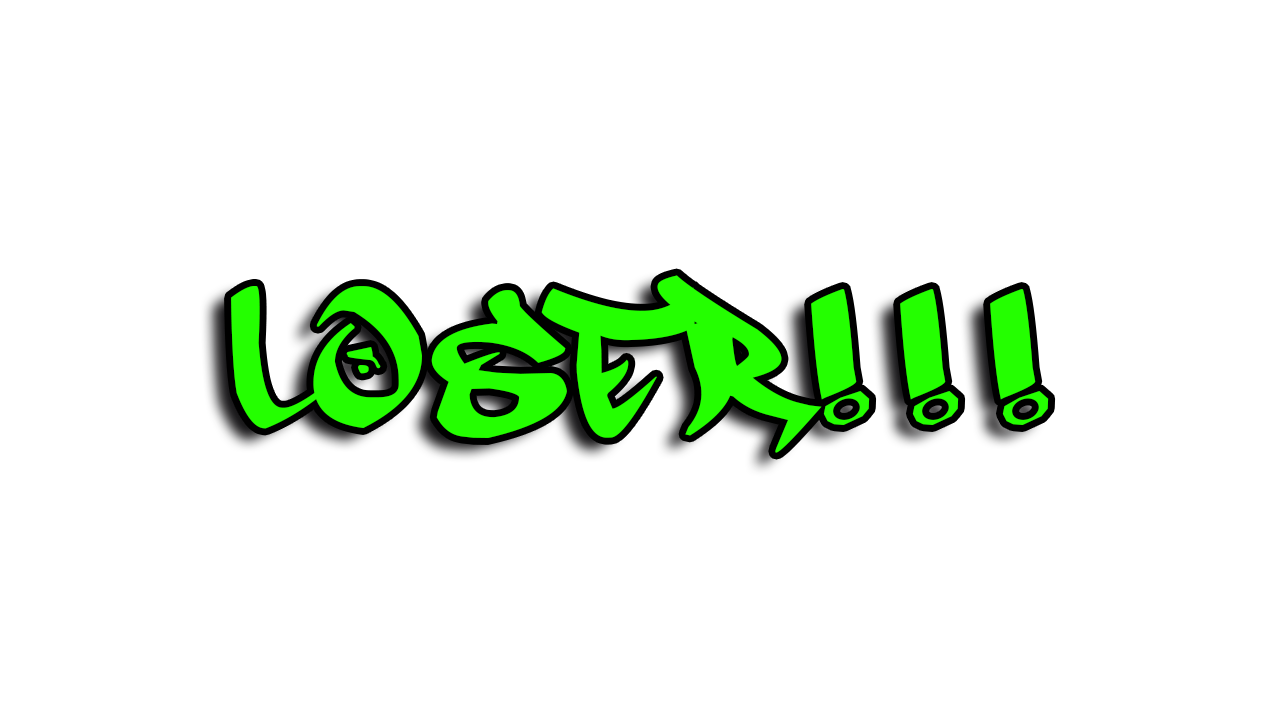
<style>
.page{position:relative;width:1280px;height:720px;background:#ffffff}
.page>*{position:absolute;margin:0}
.t1{font:150px "MESTIZOSUNIDOS-URBANHOOKUPZ";letter-spacing:0.18em;color:#24ff00}
</style>
<div class="page">
<p class="t1" style="left:231px;top:275px;width:818px;height:178px">LOSER!!!</p>
</div>
